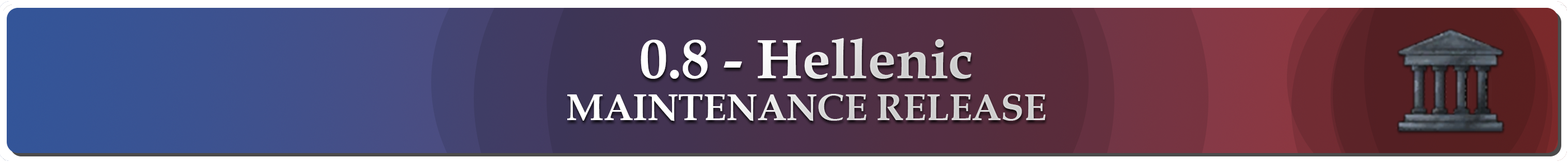
<style>
.page{position:relative;width:1568px;height:162px}
.page>*{position:absolute;margin:0}
.t1{font:37.3px/42px "BookAntiqua-Bold"}
.t2{font:56px "BookAntiqua-Bold"}
</style>
<div class="page">
<p class="t1" style="left:567px;top:38px;width:479px;height:84px;text-align:center"><span class="t2">0.8 - Hellenic<br></span>MAINTENANCE RELEASE</p>
</div>
